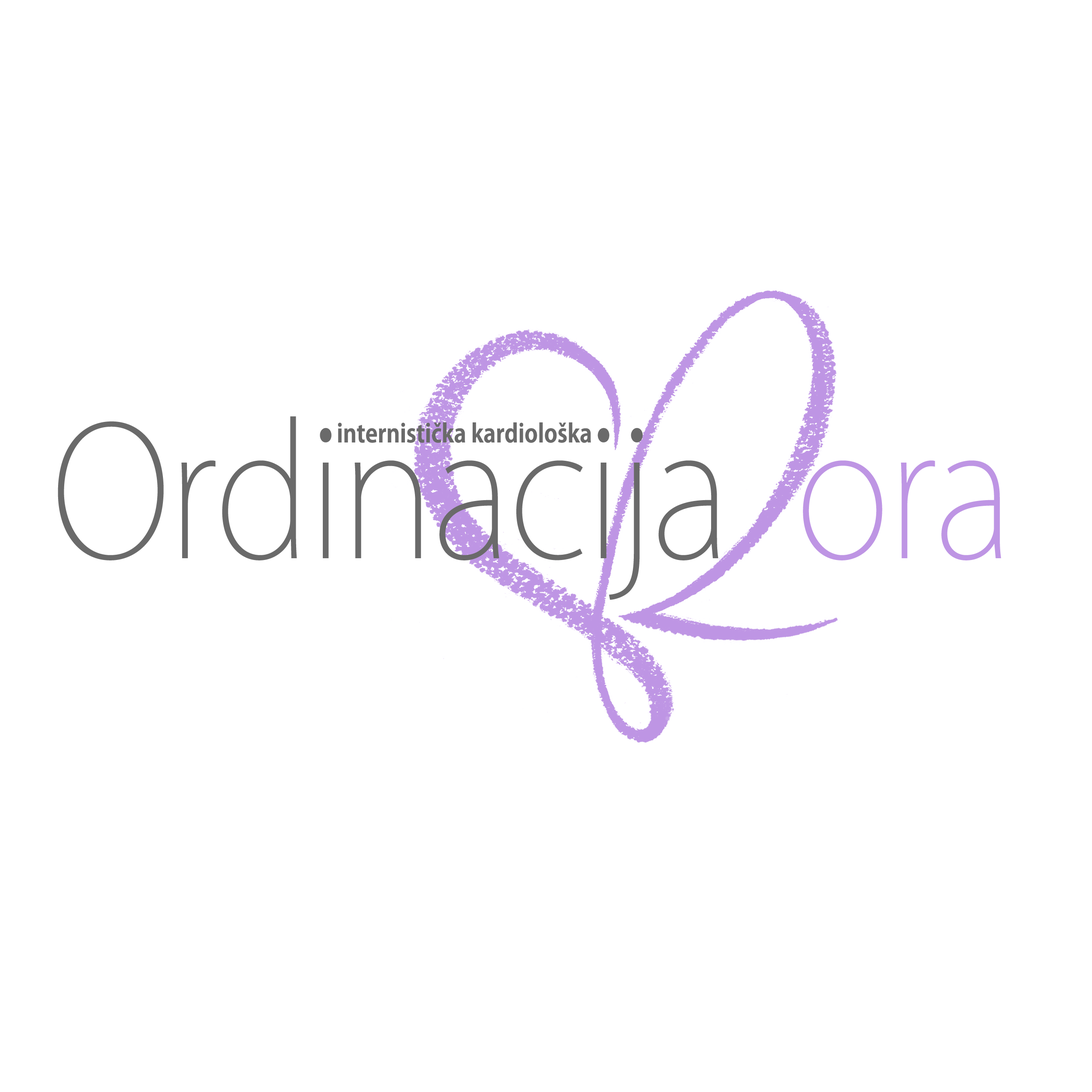
<style>
.page{position:relative;width:1092px;height:1092px;background:#ffffff}
.page>*{position:absolute;margin:0}
.t1{font:305.8px "KozGoPr6N-ExtraLight";letter-spacing:-0.02em;color:#6a6a6a;scale:0.9 1}
.t2{font:305.8px "KozGoPr6N-ExtraLight";letter-spacing:-0.02em;color:#be95e4;scale:0.9 1}
.t3{font:42.8px "KozGoPr6N-Bold";color:#6a6a6a;scale:0.9 1}
</style>
<div class="page">
<p class="t1" style="left:58px;top:416px;width:943px;height:184px">Ordinacija  <span class="t2">ora</span></p>
<p class="t3" style="left:338px;top:422px;width:253px;height:21px">internistička kardiološka</p>
</div>
